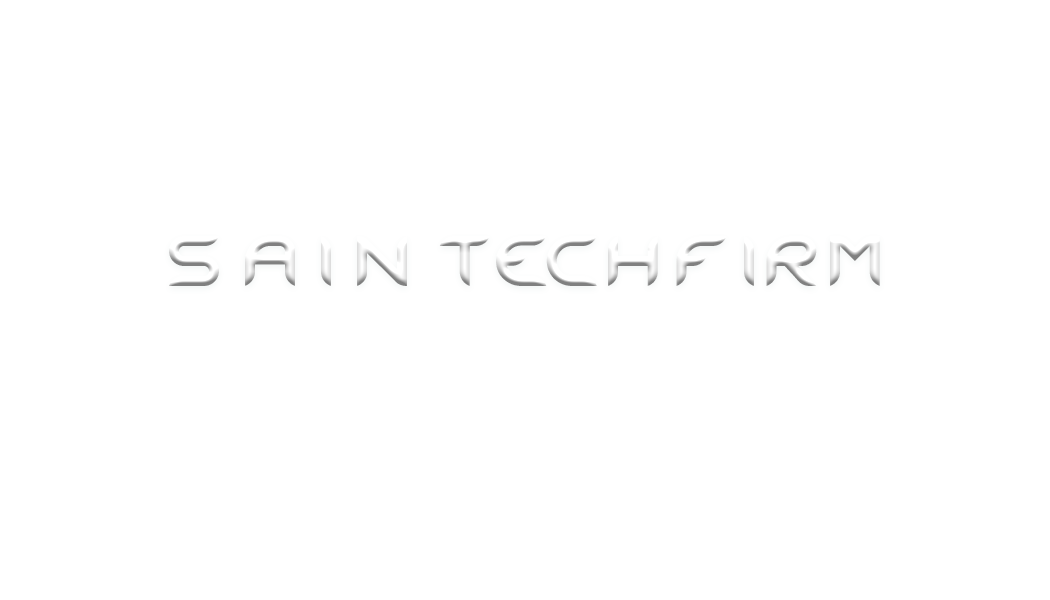
<style>
.page{position:relative;width:1050px;height:600px;background:#ffffff}
.page>*{position:absolute;margin:0}
.t1{font:50px "Maestro-Regular";font-variant:small-caps}
</style>
<div class="page">
<p class="t1" style="left:169px;top:236px;width:711px;height:50px">S A I N  TECH FIRM</p>
</div>
